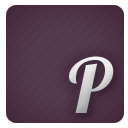
<style>
.page{position:relative;width:128px;height:128px}
.page>*{position:absolute;margin:0}
.t1{font:75px "Lobster1.4"}
</style>
<div class="page">
<p class="t1" style="left:69px;top:56px;width:45px;height:57px">P</p>
</div>
